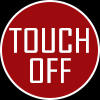
<style>
.page{position:relative;width:100px;height:100px;background:#9e0b0f}
.page>*{position:absolute;margin:0}
.t1{font:32px/30.2px "AgencyFB-Reg";color:#ffffff;scale:1.23 1}
</style>
<div class="page">
<p class="t1" style="left:9px;top:28px;width:80px;height:55px;text-align:center">TOUCH<br>OFF</p>
</div>
